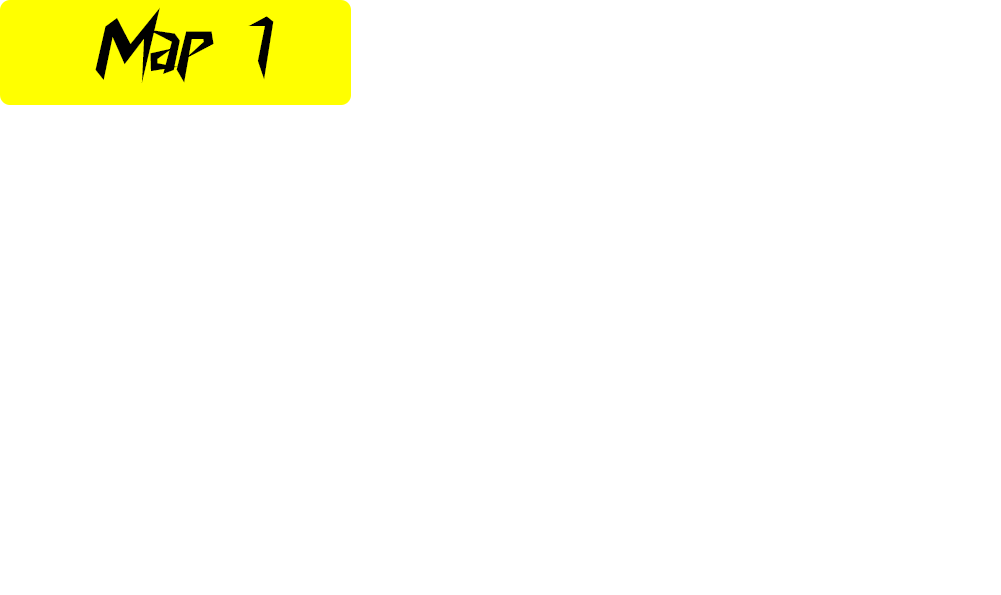
<style>
.page{position:relative;width:1001px;height:595px;background:#ffffff}
.page>*{position:absolute;margin:0}
.t1{font:74.6px "CyberwayRiders";color:#000000}
</style>
<div class="page">
<p class="t1" style="left:95px;top:7px;width:179px;height:76px">Map   1</p>
</div>
